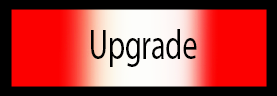
<style>
.page{position:relative;width:277px;height:96px;background:#000000}
.page>*{position:absolute;margin:0}
.t1{font:41.7px "MyriadPro-Regular";color:#000000;scale:0.72 1}
</style>
<div class="page">
<p class="t1" style="left:91px;top:29px;width:106px;height:38px">Upgrade</p>
</div>
